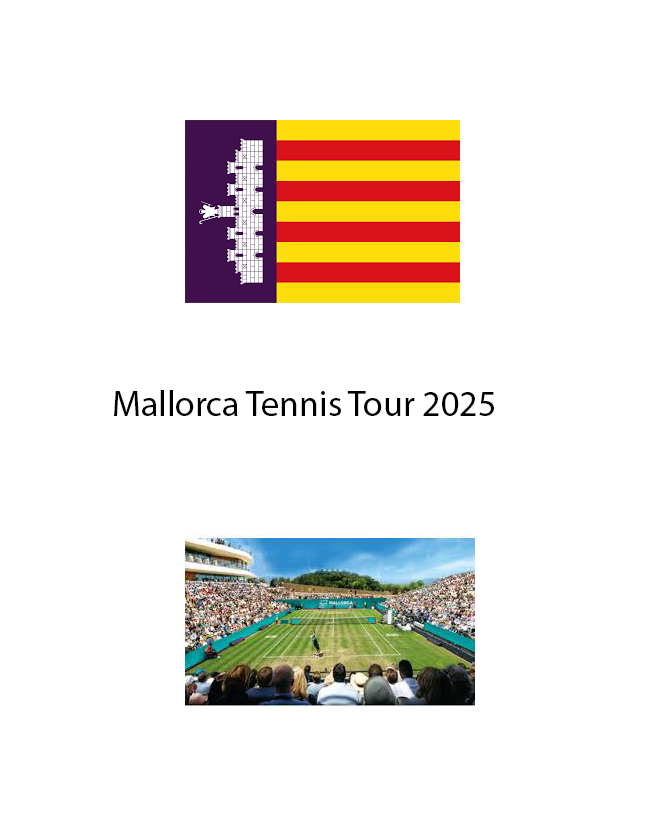
<style>
.page{position:relative;width:659px;height:837px;background:#ffffff}
.page>*{position:absolute;margin:0}
.t1{font:36px "MyriadPro-Regular";color:#000000}
</style>
<div class="page">
<p class="t1" style="left:114px;top:390px;width:380px;height:26px">Mallorca Tennis Tour 2025</p>
</div>
